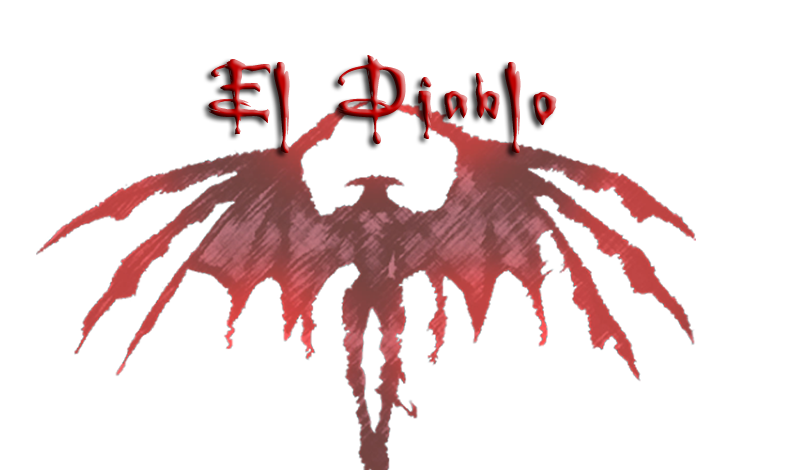
<style>
.page{position:relative;width:800px;height:470px;background:#ffffff}
.page>*{position:absolute;margin:0}
.t1{font:106.4px "Buffied"}
</style>
<div class="page">
<p class="t1" style="left:207px;top:55px;width:350px;height:98px">El Diablo</p>
</div>
